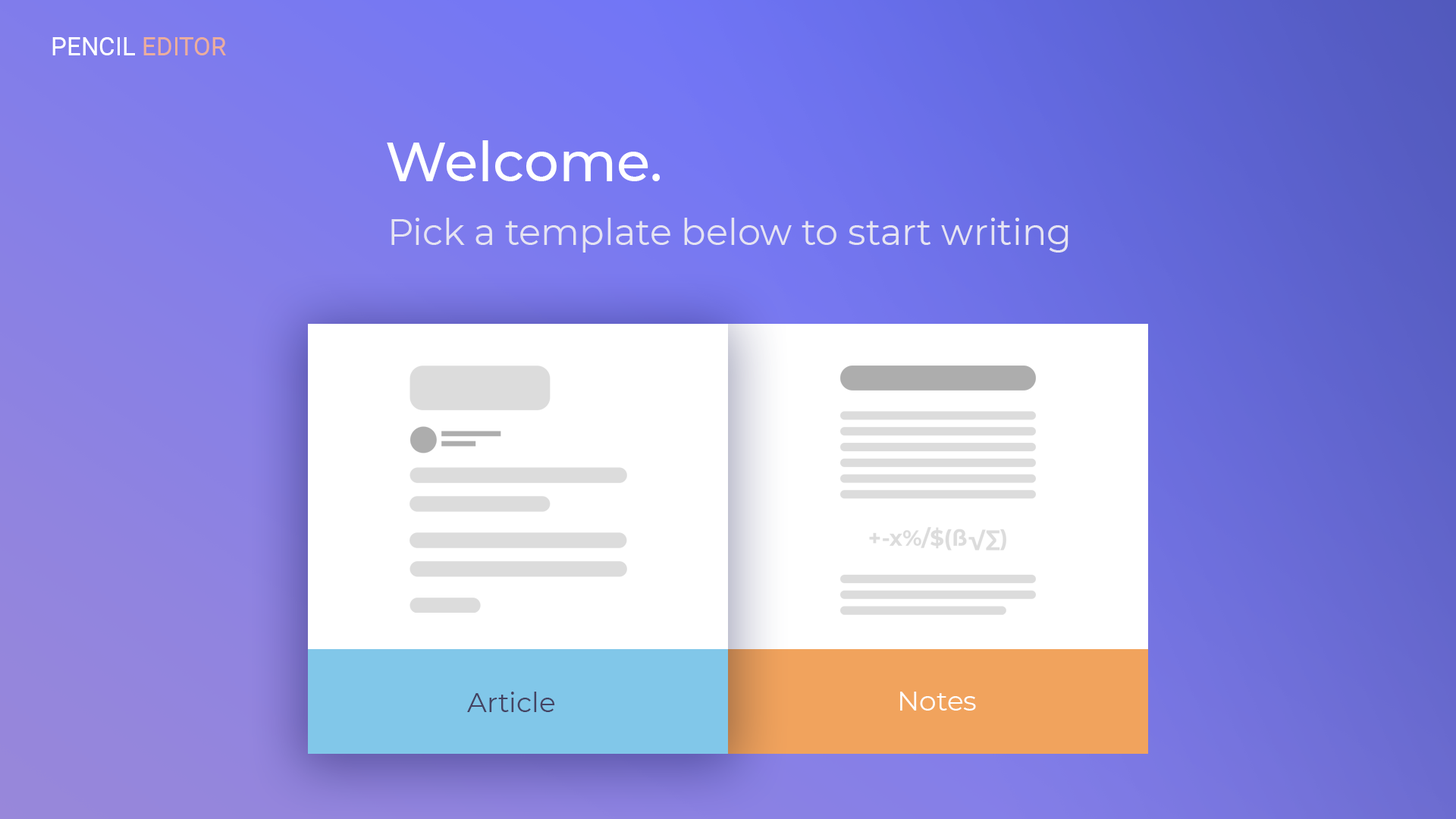
<style>
.page{position:relative;width:1456px;height:819px}
.page>*{position:absolute;margin:0}
.t1{font:25.1px "Roboto-Regular";color:#ffffff}
.t2{font:25.1px "Roboto-Regular";color:#ebad9d}
.t3{font:54.8px "Montserrat-Medium";color:#ffffff}
.t4{font:36.4px "Montserrat-Regular";color:#e5e3f2}
.t5{font:27.3px "Montserrat-Regular";color:#444362}
.t6{font:27.3px "Montserrat-Regular";color:#fefefe}
</style>
<div class="page">
<p class="t1" style="left:52px;top:37px;width:174px;height:18px">PENCIL <span class="t2">EDITOR</span></p>
<p class="t3" style="left:387px;top:140px;width:273px;height:41px">Welcome.</p>
<p class="t4" style="left:391px;top:218px;width:677px;height:35px">Pick a template below to start writing</p>
<p class="t5" style="left:467px;top:692px;width:88px;height:20px">Article</p>
<p class="t6" style="left:900px;top:692px;width:76px;height:19px">Notes</p>
</div>
